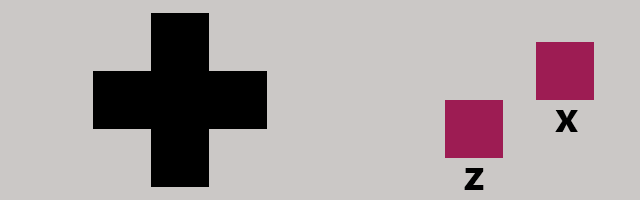
<style>
.page{position:relative;width:640px;height:200px;background:#cbc8c6}
.page>*{position:absolute;margin:0}
.t1{font:41.7px "MicrosoftTaiLe-Bold";color:#000000}
</style>
<div class="page">
<p class="t1" style="left:555px;top:110px;width:23px;height:22px">x</p>
<p class="t1" style="left:464px;top:168px;width:20px;height:22px">z</p>
</div>
